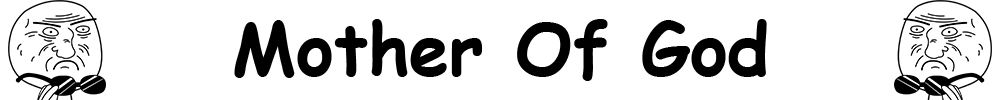
<style>
.page{position:relative;width:1000px;height:100px;background:#ffffff}
.page>*{position:absolute;margin:0}
.t1{font:72px "ComicSansMS-Bold";color:#000000}
</style>
<div class="page">
<p class="t1" style="left:234px;top:19px;width:533px;height:62px">Mother Of God</p>
</div>
